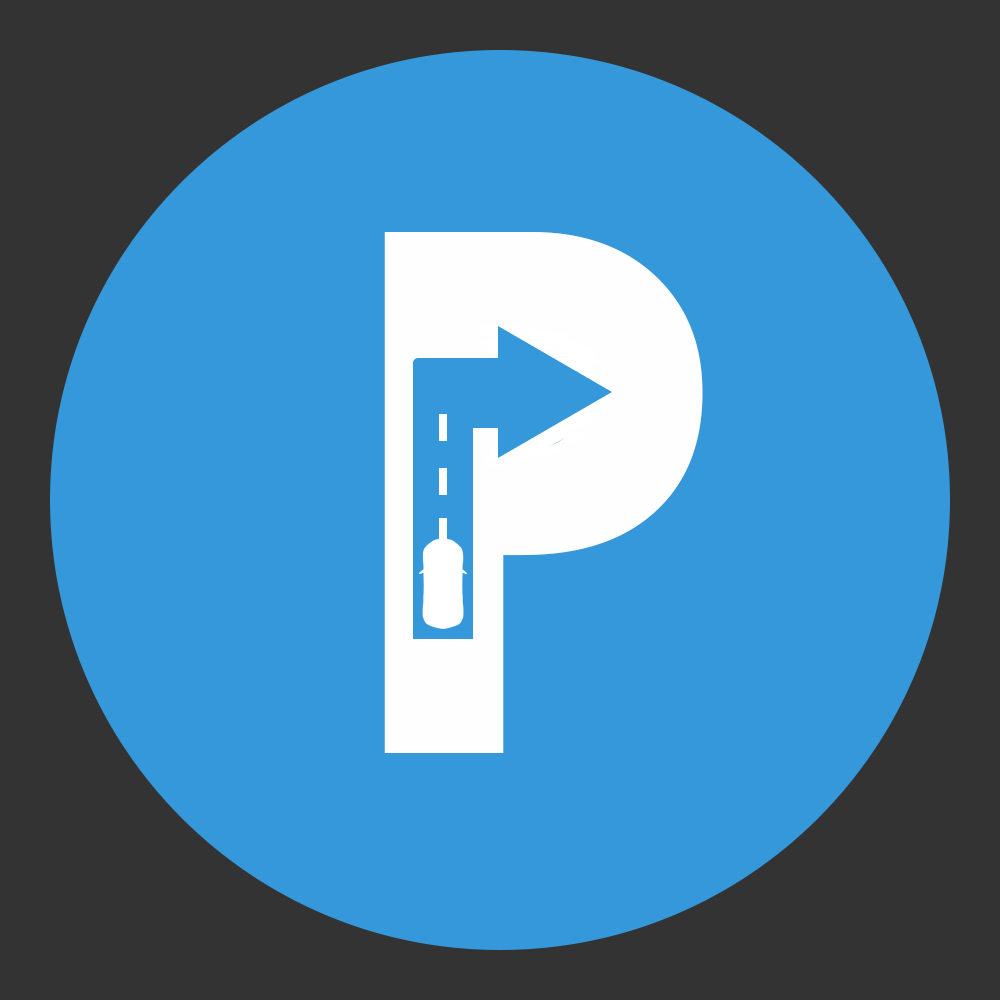
<style>
.page{position:relative;width:1000px;height:1000px;background:#3498db}
.page>*{position:absolute;margin:0}
.t1{font:800px "TwCenMT-CondensedExtraBold";letter-spacing:0.06em;color:#fffefe}
</style>
<div class="page">
<p class="t1" style="left:384px;top:232px;width:319px;height:521px">P</p>
</div>
